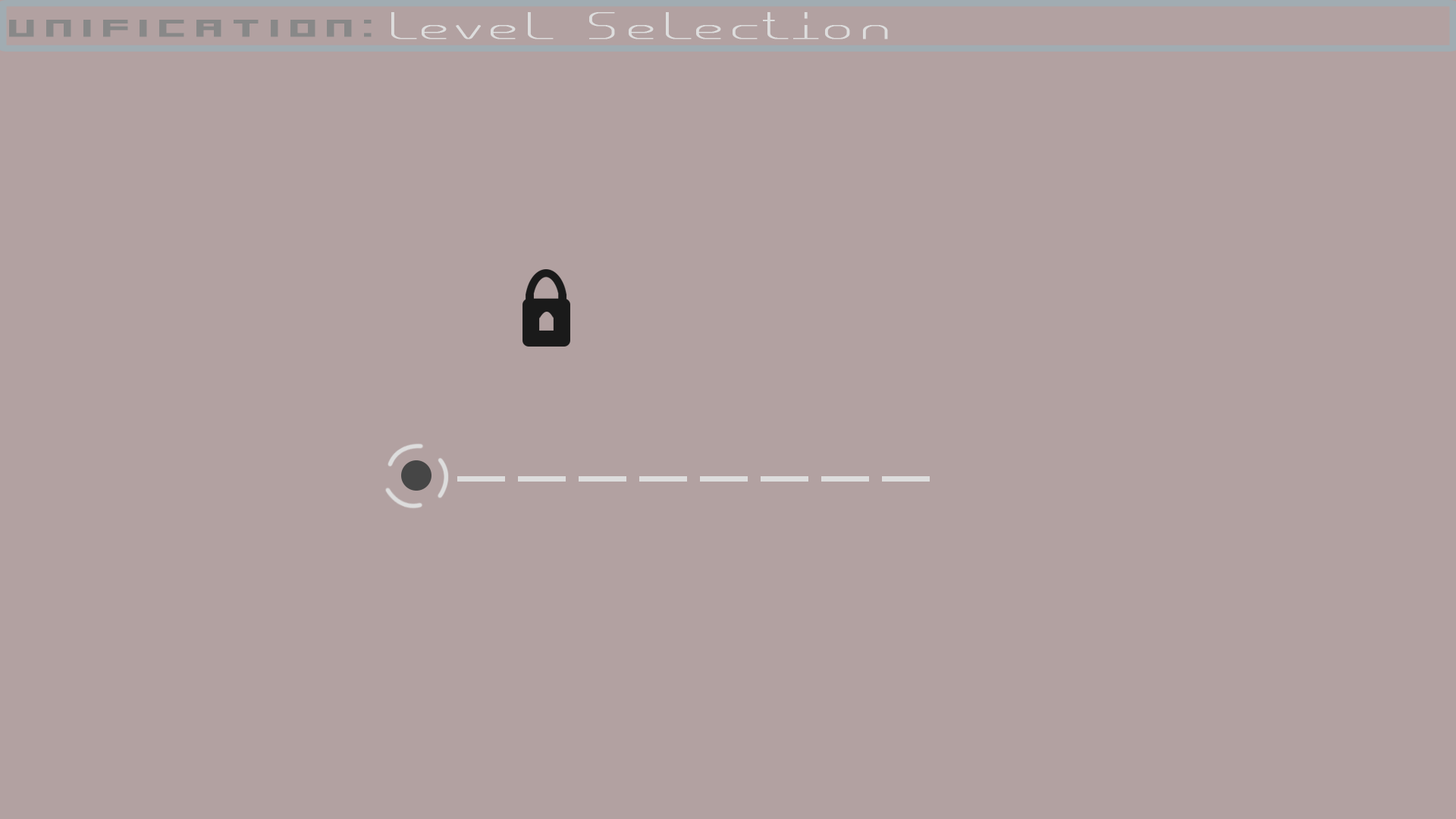
<style>
.page{position:relative;width:1456px;height:819px;background:#b2a1a1}
.page>*{position:absolute;margin:0}
.t1{font:26.5px "AcrossTheStars";letter-spacing:0.14em;color:#dddddd;font-weight:bold;scale:1.75 1}
.t2{font:26.5px "Kenney-Future-Square";letter-spacing:0.14em;color:#888888;font-weight:bold;scale:1.75 1}
</style>
<div class="page">
<p class="t1" style="left:391px;top:12px;width:497px;height:27px">level Selection</p>
<p class="t2" style="left:9px;top:20px;width:363px;height:17px">unification:</p>
</div>
